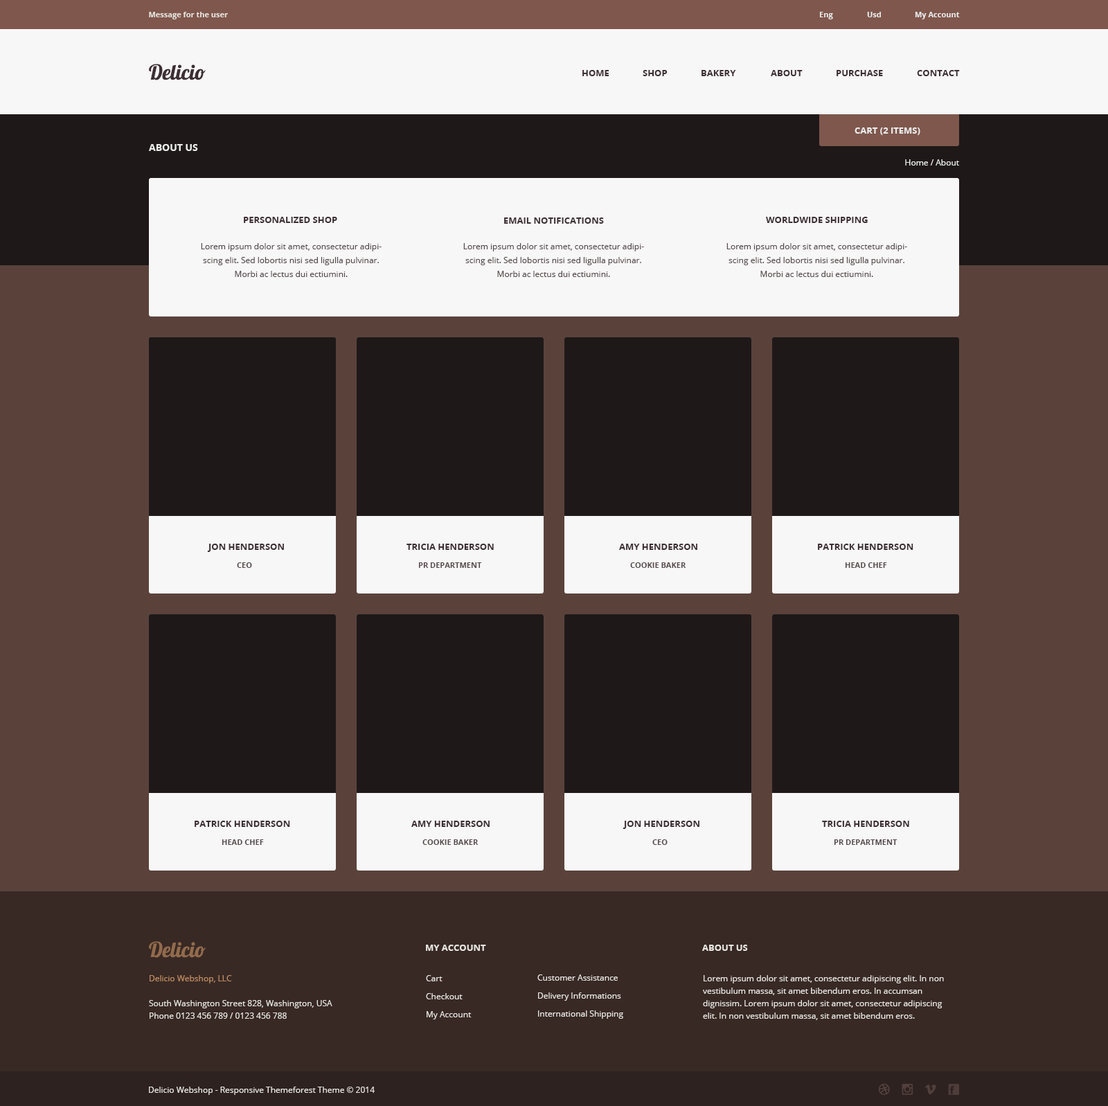
<style>
.page{position:relative;width:1108px;height:1106px;background:#1e1918}
.page>*{position:absolute;margin:0}
.t1{font:7.6px "OpenSans-Bold";color:#e7e5de}
.t2{font:7.6px "OpenSans-Bold";color:#ebebeb}
.t3{font:20.8px "Lobster1.4";color:#3c2f33}
.t4{font:9px "OpenSans-Bold";color:#3c2f33}
.t5{font:9px "OpenSans-Bold";color:#ebebeb}
.t6{font:9.7px "OpenSans-Bold";color:#ebebeb}
.t7{font:8.3px "OpenSans";color:#ebebeb}
.t8{font:8.3px/13.8px "OpenSans";color:#554a4c}
.t9{font:7.6px "OpenSans-Bold";color:#554a4c}
.t10{font:20.8px "Lobster1.4";color:#926b4c}
.t11{font:9px "OpenSans-Bold";color:#e7e5de}
.t12{font:8.3px/12.5px "OpenSans";color:#e7e5de}
.t13{font:8.3px/12.5px "OpenSans";color:#be8c60}
.t14{font:8.3px/18px "OpenSans";color:#e7e5de}
.t15{font:8.3px "OpenSans";color:#e7e5de}
</style>
<div class="page">
<p class="t1" style="left:149px;top:12px;width:79px;height:7px">Message for the user</p>
<p class="t2" style="left:819px;top:12px;width:14px;height:7px">Eng</p>
<p class="t2" style="left:867px;top:12px;width:14px;height:5px">Usd</p>
<p class="t2" style="left:915px;top:12px;width:45px;height:7px">My Account</p>
<p class="t3" style="left:149px;top:64px;width:57px;height:16px">Delicio</p>
<p class="t4" style="left:582px;top:70px;width:27px;height:6px">HOME</p>
<p class="t4" style="left:642px;top:70px;width:25px;height:6px">SHOP</p>
<p class="t4" style="left:701px;top:70px;width:35px;height:6px">BAKERY</p>
<p class="t4" style="left:771px;top:70px;width:31px;height:6px">ABOUT</p>
<p class="t4" style="left:836px;top:70px;width:47px;height:6px">PURCHASE</p>
<p class="t4" style="left:917px;top:70px;width:43px;height:6px">CONTACT</p>
<p class="t5" style="left:854px;top:127px;width:66px;height:8px">CART (2 ITEMS)</p>
<p class="t6" style="left:149px;top:144px;width:49px;height:7px">ABOUT US</p>
<p class="t7" style="left:905px;top:159px;width:54px;height:6px">Home / About</p>
<p class="t4" style="left:244px;top:217px;width:93px;height:6px">PERSONALIZED SHOP</p>
<p class="t4" style="left:504px;top:217px;width:100px;height:7px">EMAIL NOTIFICATIONS</p>
<p class="t4" style="left:766px;top:217px;width:101px;height:6px">WORLDWIDE SHIPPING</p>
<p class="t8" style="left:201px;top:243px;width:180px;height:34px;text-align:center">Lorem ipsum dolor sit amet, consectetur adipiscing elit. Sed lobortis nisi sed ligulla pulvinar. Morbi ac lectus dui ectiumini.</p>
<p class="t8" style="left:463px;top:243px;width:181px;height:34px;text-align:center">Lorem ipsum dolor sit amet, consectetur adipiscing elit. Sed lobortis nisi sed ligulla pulvinar. Morbi ac lectus dui ectiumini.</p>
<p class="t8" style="left:726px;top:243px;width:181px;height:34px;text-align:center">Lorem ipsum dolor sit amet, consectetur adipiscing elit. Sed lobortis nisi sed ligulla pulvinar. Morbi ac lectus dui ectiumini.</p>
<p class="t4" style="left:207px;top:543px;width:77px;height:9px">JON HENDERSON</p>
<p class="t4" style="left:406px;top:543px;width:88px;height:7px">TRICIA HENDERSON</p>
<p class="t4" style="left:619px;top:543px;width:78px;height:7px">AMY HENDERSON</p>
<p class="t4" style="left:818px;top:543px;width:95px;height:7px">PATRICK HENDERSON</p>
<p class="t9" style="left:237px;top:562px;width:15px;height:6px">CEO</p>
<p class="t9" style="left:418px;top:562px;width:64px;height:6px">PR DEPARTMENT</p>
<p class="t9" style="left:630px;top:562px;width:56px;height:6px">COOKIE BAKER</p>
<p class="t9" style="left:845px;top:562px;width:42px;height:6px">HEAD CHEF</p>
<p class="t4" style="left:195px;top:820px;width:95px;height:7px">PATRICK HENDERSON</p>
<p class="t4" style="left:411px;top:820px;width:78px;height:7px">AMY HENDERSON</p>
<p class="t4" style="left:622px;top:820px;width:77px;height:9px">JON HENDERSON</p>
<p class="t4" style="left:822px;top:820px;width:87px;height:7px">TRICIA HENDERSON</p>
<p class="t9" style="left:222px;top:839px;width:42px;height:6px">HEAD CHEF</p>
<p class="t9" style="left:422px;top:839px;width:56px;height:6px">COOKIE BAKER</p>
<p class="t9" style="left:652px;top:839px;width:15px;height:6px">CEO</p>
<p class="t9" style="left:834px;top:839px;width:63px;height:6px">PR DEPARTMENT</p>
<p class="t10" style="left:149px;top:941px;width:57px;height:16px">Delicio</p>
<p class="t11" style="left:426px;top:944px;width:60px;height:7px">MY ACCOUNT</p>
<p class="t11" style="left:702px;top:944px;width:46px;height:7px">ABOUT US</p>
<p class="t12" style="left:149px;top:975px;width:183px;height:43px"><span class="t13">Delicio Webshop, LLC<br><br></span>South Washington Street 828, Washington, USA <br>Phone 0123 456 789 / 0123 456 788</p>
<p class="t14" style="left:426px;top:975px;width:45px;height:44px">Cart         <br>Checkout<br>My Account</p>
<p class="t14" style="left:537px;top:974px;width:86px;height:44px">Customer Assistance<br>Delivery Informations<br>International Shipping</p>
<p class="t12" style="left:703px;top:975px;width:241px;height:45px">Lorem ipsum dolor sit amet, consectetur adipiscing elit. In non vestibulum massa, sit amet bibendum eros. In accumsan dignissim. Lorem ipsum dolor sit amet, consectetur adipiscing elit. In non vestibulum massa, sit amet bibendum eros.</p>
<p class="t15" style="left:149px;top:1086px;width:226px;height:9px">Delicio Webshop - Responsive Themeforest Theme © 2014</p>
</div>
